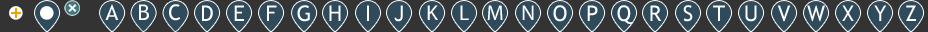
<style>
.page{position:relative;width:928px;height:32px;background:#333333}
.page>*{position:absolute;margin:0}
.t1{font:21.4px "TrebuchetMS";color:#ffffff}
.t2{font:21.4px "MyriadPro-Regular";color:#ffffff}
</style>
<div class="page">
<p class="t1" style="left:105px;top:4px;width:14px;height:16px">A</p>
<p class="t1" style="left:139px;top:4px;width:10px;height:16px">B</p>
<p class="t1" style="left:169px;top:4px;width:12px;height:17px">C</p>
<p class="t1" style="left:202px;top:5px;width:11px;height:16px">D</p>
<p class="t1" style="left:234px;top:5px;width:10px;height:16px">E</p>
<p class="t1" style="left:267px;top:5px;width:10px;height:16px">F</p>
<p class="t1" style="left:297px;top:5px;width:13px;height:17px">G</p>
<p class="t1" style="left:329px;top:5px;width:12px;height:16px">H</p>
<p class="t1" style="left:367px;top:5px;width:2px;height:16px">I</p>
<p class="t1" style="left:394px;top:5px;width:9px;height:17px">J</p>
<p class="t2" style="left:427px;top:5px;width:11px;height:15px">K</p>
<p class="t2" style="left:460px;top:5px;width:9px;height:15px">L</p>
<p class="t2" style="left:487px;top:5px;width:16px;height:15px">M</p>
<p class="t2" style="left:522px;top:5px;width:12px;height:15px">N</p>
<p class="t1" style="left:553px;top:5px;width:14px;height:17px">O</p>
<p class="t1" style="left:587px;top:5px;width:11px;height:16px">P</p>
<p class="t1" style="left:617px;top:5px;width:16px;height:20px">Q</p>
<p class="t1" style="left:650px;top:5px;width:12px;height:16px">R</p>
<p class="t1" style="left:683px;top:5px;width:10px;height:17px">S</p>
<p class="t1" style="left:713px;top:5px;width:12px;height:16px">T</p>
<p class="t1" style="left:745px;top:5px;width:12px;height:17px">U</p>
<p class="t1" style="left:777px;top:5px;width:14px;height:17px">V</p>
<p class="t1" style="left:807px;top:5px;width:18px;height:17px">W</p>
<p class="t1" style="left:842px;top:5px;width:12px;height:16px">X</p>
<p class="t1" style="left:874px;top:5px;width:13px;height:16px">Y</p>
<p class="t1" style="left:906px;top:5px;width:10px;height:16px">Z</p>
</div>
